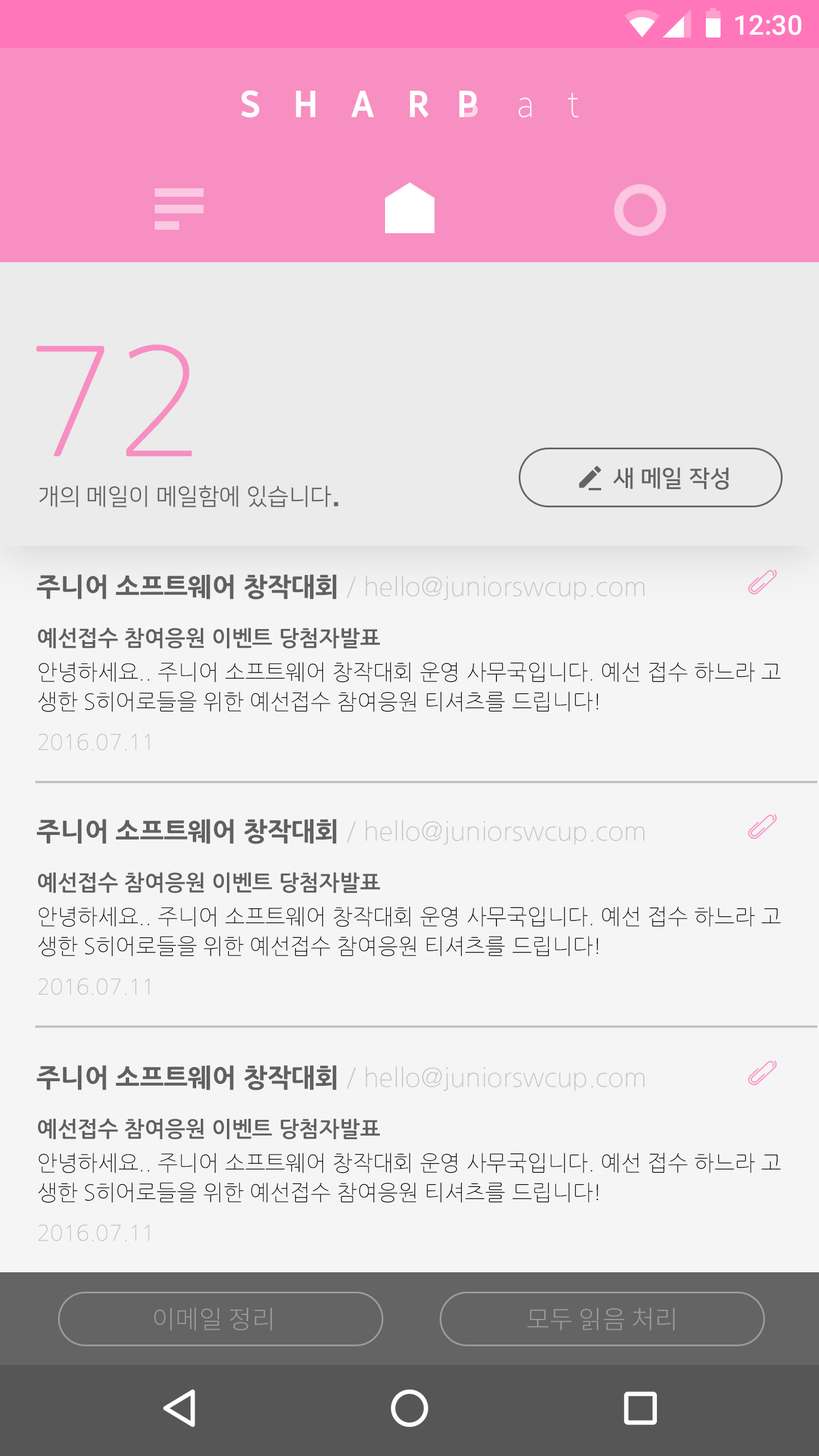
<style>
.page{position:relative;width:819px;height:1456px;background:#f5f5f5}
.page>*{position:absolute;margin:0}
.t1{font:27.3px "Roboto-Medium";color:#ffffff}
.t2{font:23.3px/54.6px "NanumSquareR";color:#646464}
.t3{font:147.9px/10.2px "NanumGothicLight";color:#f78fc2}
.t4{font:41.5px/54.6px "NanumSquareR";color:#646464}
.t5{font:23.3px "NanumSquareB";color:#646464}
.t6{font:25.6px "NanumGothicLight";color:#c6c6c6}
.t7{font:25.6px "NanumGothicExtraBold";color:#606060}
.t8{font:21.6px/29.6px "NanumGothicLight";color:#000000}
.t9{font:21.6px/35.3px "NanumGothicBold";color:#606060}
.t10{font:21.6px/34.1px "NanumGothicLight";color:#000000}
.t11{font:21.6px/40.4px "NanumGothicLight";color:#c1c1c1}
.t12{font:25.6px "NotoSansCJKkr-Light";color:#9b9b9b}
</style>
<div class="page">
<p class="t1" style="left:735px;top:15px;width:66px;height:20px">12:30</p>
<p class="t2" style="left:36px;top:345px;width:302px;height:162px"><span class="t3">72<br></span>  개의 메일이 메일함에 있습니다<span class="t4">.</span></p>
<p class="t5" style="left:613px;top:468px;width:116px;height:22px">새 메일 작성</p>
<p class="t6" style="left:36px;top:574px;width:608px;height:26px"><span class="t7">주니어 소프트웨어 창작대회 </span>/ hello@juniorswcup.com</p>
<p class="t8" style="left:38px;top:627px;width:743px;height:124px"><span class="t9">예선접수 참여응원 이벤트 당첨자발표<br></span><span class="t10">안녕하세요.. 주니어 소프트웨어 창작대회 운영 사무국입니다. 예선 접</span>수 하느라 고 생한 S히어로들을 위한 예선접수 참여응원 티셔츠를 드립니다!<br><span class="t11">2016.07.11</span></p>
<p class="t6" style="left:36px;top:819px;width:608px;height:26px"><span class="t7">주니어 소프트웨어 창작대회 </span>/ hello@juniorswcup.com</p>
<p class="t8" style="left:38px;top:872px;width:743px;height:123px"><span class="t9">예선접수 참여응원 이벤트 당첨자발표<br></span><span class="t10">안녕하세요.. 주니어 소프트웨어 창작대회 운영 사무국입니다. 예선 접</span>수 하느라 고 생한 S히어로들을 위한 예선접수 참여응원 티셔츠를 드립니다!<br><span class="t11">2016.07.11</span></p>
<p class="t6" style="left:36px;top:1065px;width:608px;height:26px"><span class="t7">주니어 소프트웨어 창작대회 </span>/ hello@juniorswcup.com</p>
<p class="t8" style="left:38px;top:1118px;width:743px;height:124px"><span class="t9">예선접수 참여응원 이벤트 당첨자발표<br></span><span class="t10">안녕하세요.. 주니어 소프트웨어 창작대회 운영 사무국입니다. 예선 접</span>수 하느라 고 생한 S히어로들을 위한 예선접수 참여응원 티셔츠를 드립니다!<br><span class="t11">2016.07.11</span></p>
<p class="t12" style="left:154px;top:1308px;width:118px;height:23px">이메일 정리</p>
<p class="t12" style="left:527px;top:1308px;width:148px;height:23px">모두 읽음 처리</p>
</div>
